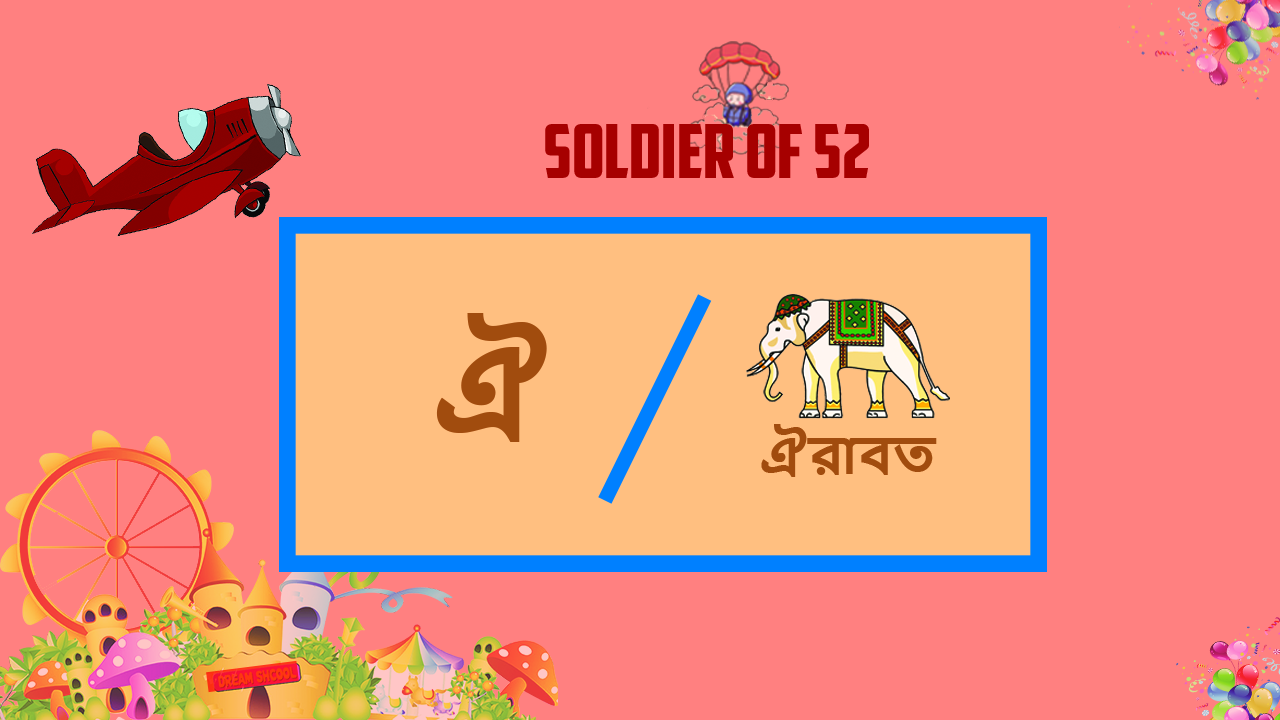
<style>
.page{position:relative;width:1280px;height:720px;background:#ff8080}
.page>*{position:absolute;margin:0}
.t1{font:74.5px "AmericanCaptain";color:#a60000}
.t2{font:122.1px "NirmalaUI-Bold";color:#a24b0d}
.t3{font:49.7px "NirmalaUI-Bold";color:#a24b0d}
</style>
<div class="page">
<p class="t1" style="left:545px;top:124px;width:324px;height:54px">SOLDIER OF 52</p>
<p class="t2" style="left:436px;top:313px;width:111px;height:129px">ঐ</p>
<p class="t3" style="left:761px;top:424px;width:176px;height:53px">ঐরাবত</p>
</div>
